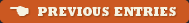
<style>
.page{position:relative;width:189px;height:23px;background:#cb5821}
.page>*{position:absolute;margin:0}
.t1{font:12px "Rockwell-ExtraBold";letter-spacing:0.01em;color:#f5f2e2;text-transform:uppercase}
</style>
<div class="page">
<p class="t1" style="left:38px;top:7px;width:138px;height:9px">Previous Entries</p>
</div>
